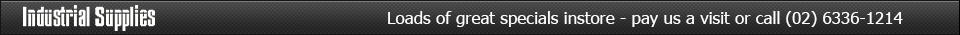
<style>
.page{position:relative;width:960px;height:35px}
.page>*{position:absolute;margin:0}
.t1{font:17px "Tahoma";color:#ffffff}
</style>
<div class="page">
<p class="t1" style="left:388px;top:11px;width:515px;height:16px">Loads of great specials instore - pay us a visit or call (02) 6336-1214</p>
</div>
